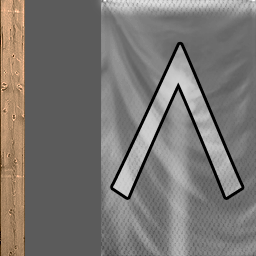
<style>
.page{position:relative;width:256px;height:256px;background:#5b5b5b}
.page>*{position:absolute;margin:0}
.t1{font:203.2px "LithosPro-Regular";color:#b6b6b6;scale:0.88 1}
</style>
<div class="page">
<p class="t1" style="left:113px;top:44px;width:129px;height:153px;rotate:180deg">V</p>
</div>
